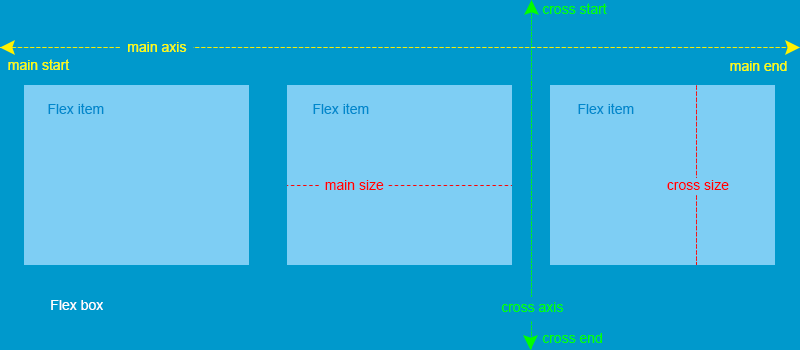
<style>
.page{position:relative;width:800px;height:350px;background:#0099cc}
.page>*{position:absolute;margin:0}
.t1{font:14px "ArialMT";color:#00ff00}
.t2{font:14px "ArialMT";color:#ffff00}
.t3{font:14px "ArialMT";color:#0088cc}
.t4{font:14px "ArialMT";color:#ff0000}
.t5{font:14px "ArialMT";color:#ffffff}
</style>
<div class="page">
<p class="t1" style="left:542px;top:3px;width:65px;height:11px">cross start</p>
<p class="t2" style="left:128px;top:42px;width:59px;height:10px">main axis</p>
<p class="t2" style="left:8px;top:59px;width:62px;height:11px">main start</p>
<p class="t2" style="left:730px;top:61px;width:57px;height:10px">main end</p>
<p class="t3" style="left:48px;top:103px;width:56px;height:11px">Flex item</p>
<p class="t3" style="left:313px;top:103px;width:56px;height:11px">Flex item</p>
<p class="t3" style="left:578px;top:103px;width:56px;height:11px">Flex item</p>
<p class="t4" style="left:325px;top:180px;width:59px;height:10px">main size</p>
<p class="t4" style="left:667px;top:180px;width:62px;height:10px">cross size</p>
<p class="t5" style="left:51px;top:300px;width:52px;height:10px">Flex box</p>
<p class="t1" style="left:501px;top:302px;width:63px;height:10px">cross axis</p>
<p class="t1" style="left:542px;top:333px;width:60px;height:10px">cross end</p>
</div>
